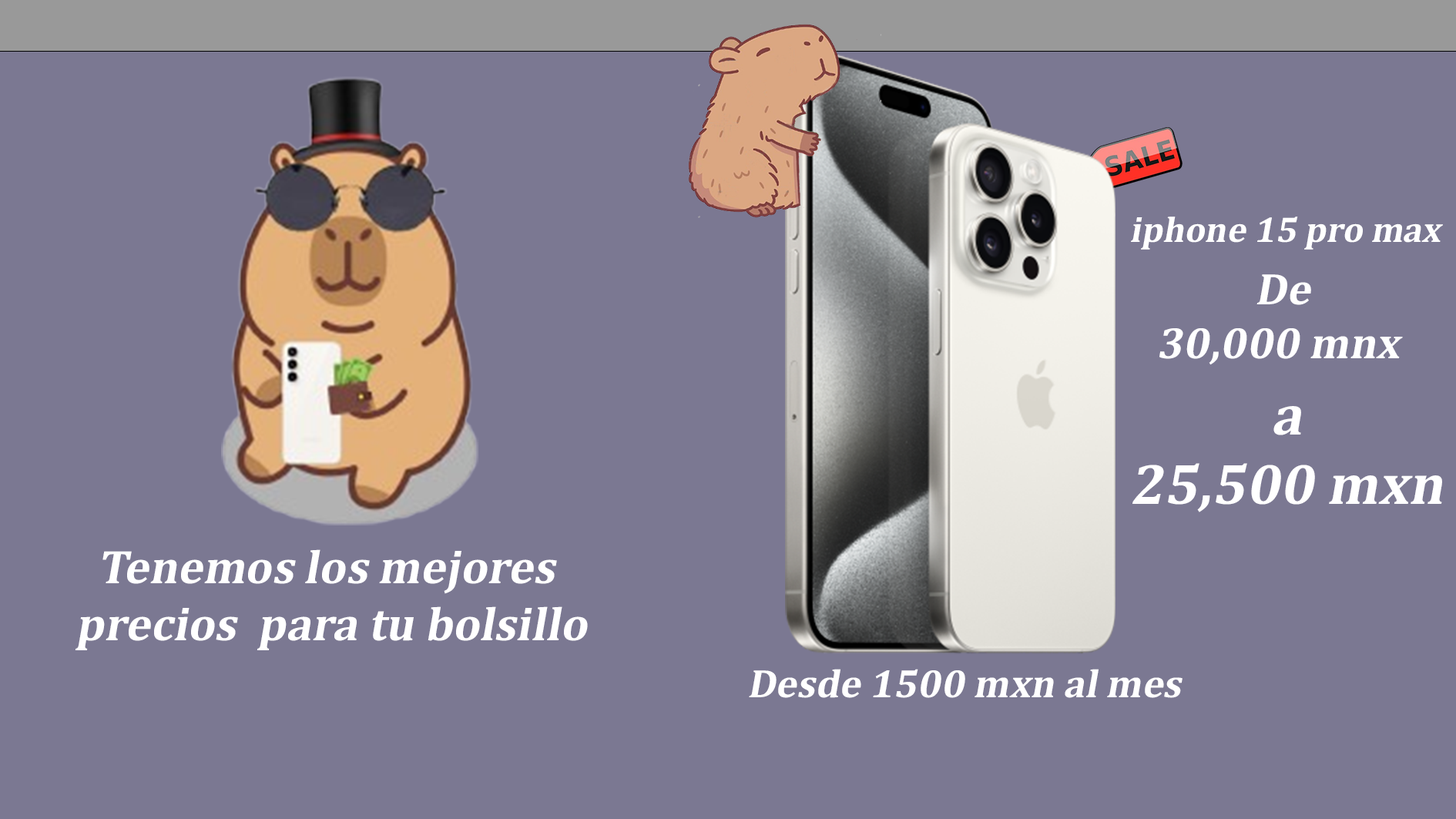
<style>
.page{position:relative;width:1456px;height:819px;background:#7b7892}
.page>*{position:absolute;margin:0}
.t1{font:36.1px "Cambria-Bold";color:#ffffff;font-style:italic}
.t2{font:44.8px "Cambria-Bold";color:#ffffff;font-style:italic}
.t3{font:57.8px "Cambria-Bold";color:#ffffff;font-style:italic}
.t4{font:47.5px "Cambria-Bold";color:#ffffff;font-style:italic}
.t5{font:40.2px "Cambria-Bold";color:#ffffff;font-style:italic}
</style>
<div class="page">
<p class="t1" style="left:1131px;top:216px;width:312px;height:34px">iphone 15 pro max</p>
<p class="t2" style="left:1159px;top:274px;width:244px;height:91px;text-align:center">De<br>30,000 mnx</p>
<p class="t3" style="left:1132px;top:406px;width:310px;height:106px;text-align:center">a<br>25,500 mxn</p>
<p class="t4" style="left:75px;top:549px;width:513px;height:101px;text-align:center">Tenemos los mejores <br>precios  para tu bolsillo</p>
<p class="t5" style="left:749px;top:669px;width:434px;height:29px">Desde 1500 mxn al mes</p>
</div>
